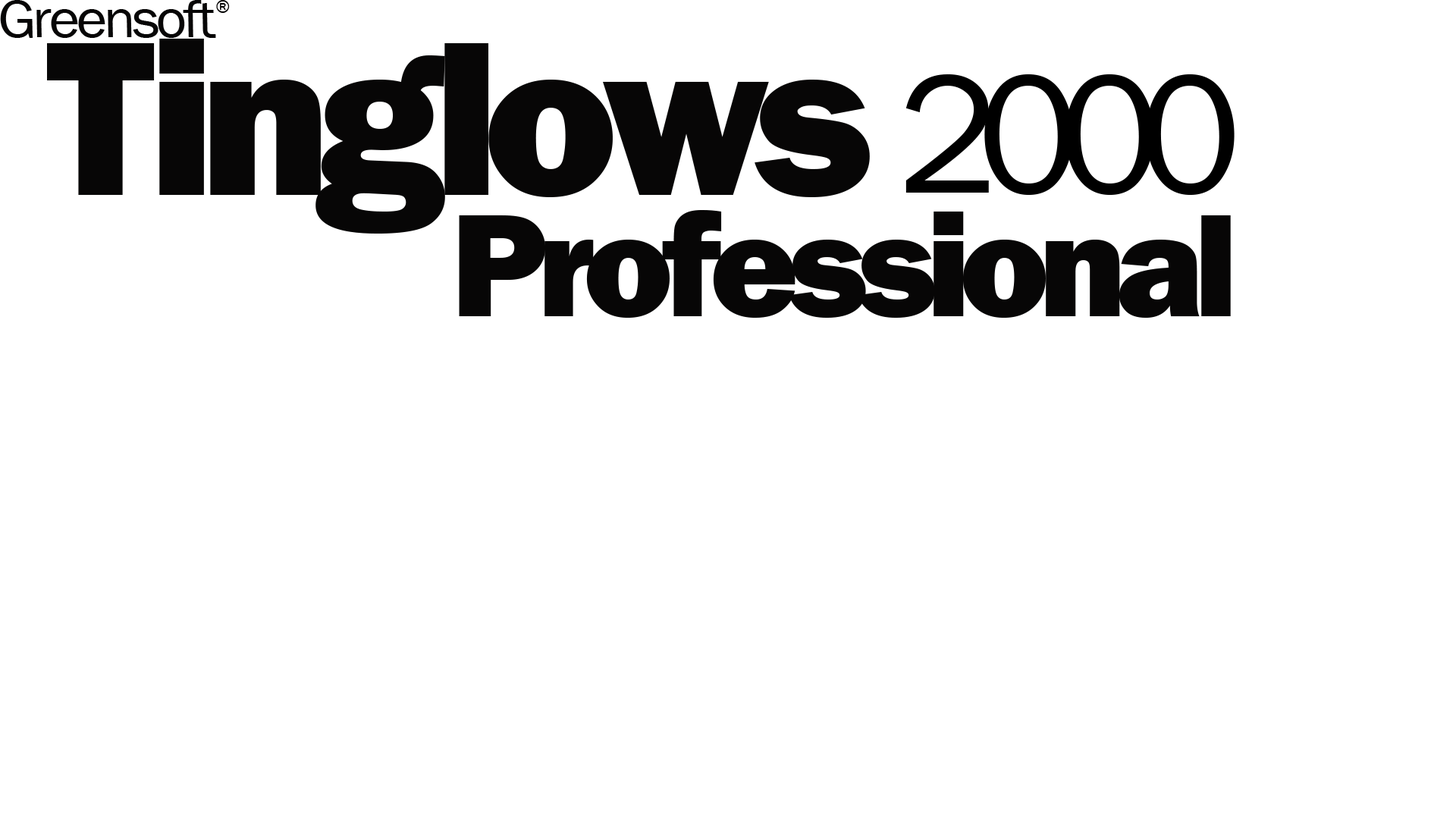
<style>
.page{position:relative;width:1456px;height:819px;background:#ffffff}
.page>*{position:absolute;margin:0}
.t1{font:54.6px "FranklinGothic-Book";color:#070606;scale:1.08 1}
.t2{font:18.2px "FranklinGothic-Book";color:#070606}
.t3{font:227.5px "FranklinGothic-Heavy";color:#070606}
.t4{font:174.4px "FranklinGothic-Book";color:#000000}
.t5{font:151.7px "FranklinGothic-Heavy";color:#070606}
</style>
<div class="page">
<p class="t1" style="left:0px;top:0px;width:216px;height:38px">Greensoft</p>
<p class="t2" style="left:216px;top:0px;width:14px;height:13px">®</p>
<p class="t3" style="left:47px;top:38px;width:823px;height:196px">Tinglows</p>
<p class="t4" style="left:905px;top:74px;width:330px;height:121px">2000</p>
<p class="t5" style="left:459px;top:209px;width:772px;height:109px">Professional</p>
</div>
